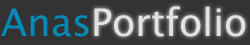
<style>
.page{position:relative;width:250px;height:45px;background:#333333}
.page>*{position:absolute;margin:0}
.t1{font:38px "LucidaSansUnicode";color:#e0e3e4}
.t2{font:38px "LucidaSansUnicode";color:#008bba}
</style>
<div class="page">
<p class="t1" style="left:94px;top:6px;width:152px;height:31px">Portfolio</p>
<p class="t2" style="left:1px;top:8px;width:88px;height:29px">Anas</p>
</div>
